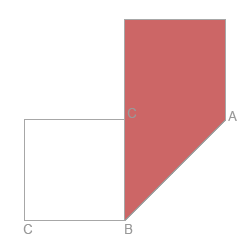
<style>
.page{position:relative;width:240px;height:240px;background:#ffffff}
.page>*{position:absolute;margin:0}
.t1{font:13.3px "ArialMT";color:#999999}
</style>
<div class="page">
<p class="t1" style="left:127px;top:108px;width:10px;height:10px">C</p>
<p class="t1" style="left:228px;top:111px;width:9px;height:10px">A</p>
<p class="t1" style="left:23px;top:224px;width:10px;height:10px">C</p>
<p class="t1" style="left:125px;top:224px;width:8px;height:10px">B</p>
</div>
